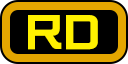
<style>
.page{position:relative;width:128px;height:64px;background:#000000}
.page>*{position:absolute;margin:0}
.t1{font:38.3px "KafuTechnoStd-U";letter-spacing:0.05em;color:#fff100}
</style>
<div class="page">
<p class="t1" style="left:28px;top:15px;width:70px;height:35px">RD</p>
</div>
